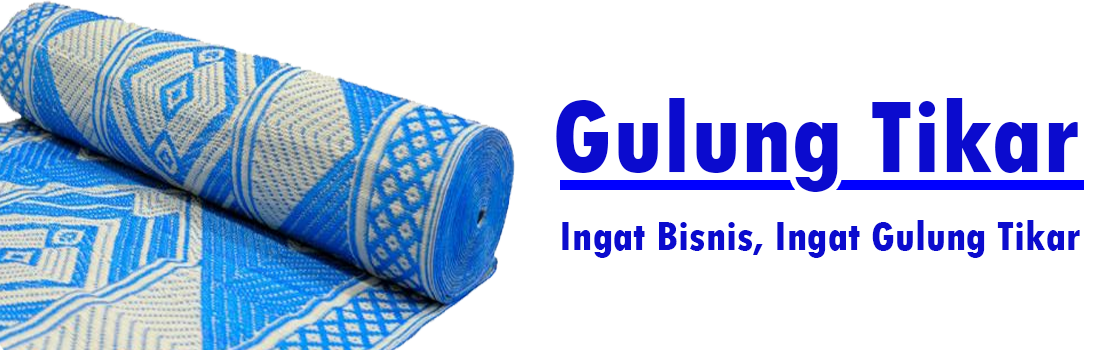
<style>
.page{position:relative;width:1100px;height:350px;background:#ffffff}
.page>*{position:absolute;margin:0}
.t1{font:108px "TwCenMT-CondensedExtraBold";color:#0b0bce}
.t2{font:43px "TwCenMT-CondensedExtraBold";color:#0b0bce}
</style>
<div class="page">
<p class="t1" style="left:556px;top:98px;width:522px;height:94px">Gulung Tikar</p>
<p class="t2" style="left:562px;top:220px;width:518px;height:38px">Ingat Bisnis, Ingat Gulung Tikar</p>
</div>
